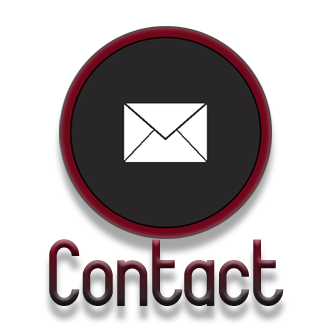
<style>
.page{position:relative;width:331px;height:331px;background:#ffffff}
.page>*{position:absolute;margin:0}
.t1{font:83.3px "Targa";scale:0.9 1}
</style>
<div class="page">
<p class="t1" style="left:49px;top:239px;width:235px;height:67px">Contact</p>
</div>
